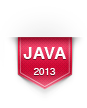
<style>
.page{position:relative;width:87px;height:108px;background:#ffffff}
.page>*{position:absolute;margin:0}
.t1{font:17px "Helvetica-Bold";color:#fefefe}
.t2{font:9.7px "Helvetica";color:#fefefe}
</style>
<div class="page">
<p class="t1" style="left:23px;top:47px;width:43px;height:28px;text-align:center">JAVA<br><br><span class="t2">2013</span></p>
</div>
